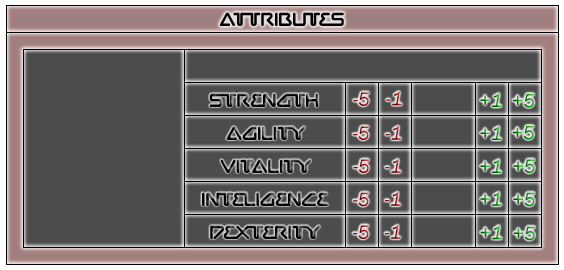
<style>
.page{position:relative;width:564px;height:270px;background:#4c4c4c}
.page>*{position:absolute;margin:0}
.t1{font:20px "Chilopod-Regular";color:#000000}
.t2{font:20px "FranklinGothic-BookItalic"}
.t3{font:20px "FranklinGothic-BookItalic";color:#960000}
</style>
<div class="page">
<p class="t1" style="left:220px;top:12px;width:124px;height:14px">Attributes</p>
<p class="t1" style="left:209px;top:93px;width:110px;height:14px">Strength</p>
<p class="t2" style="left:353px;top:92px;width:17px;height:14px">-5</p>
<p class="t2" style="left:386px;top:91px;width:16px;height:15px">-1</p>
<p class="t2" style="left:480px;top:93px;width:22px;height:14px">+1</p>
<p class="t2" style="left:513px;top:94px;width:22px;height:14px">+5</p>
<p class="t1" style="left:226px;top:126px;width:80px;height:14px">Agility</p>
<p class="t2" style="left:353px;top:126px;width:16px;height:14px">-5</p>
<p class="t3" style="left:385px;top:126px;width:17px;height:14px">-1</p>
<p class="t2" style="left:480px;top:126px;width:22px;height:14px">+1</p>
<p class="t2" style="left:512px;top:126px;width:23px;height:14px">+5</p>
<p class="t1" style="left:220px;top:159px;width:92px;height:14px">Vitality</p>
<p class="t2" style="left:353px;top:159px;width:17px;height:14px">-5</p>
<p class="t2" style="left:385px;top:159px;width:16px;height:14px">-1</p>
<p class="t2" style="left:480px;top:159px;width:22px;height:14px">+1</p>
<p class="t2" style="left:513px;top:159px;width:22px;height:14px">+5</p>
<p class="t1" style="left:202px;top:192px;width:127px;height:14px">Inteligence</p>
<p class="t2" style="left:353px;top:192px;width:16px;height:15px">-5</p>
<p class="t2" style="left:385px;top:192px;width:16px;height:14px">-1</p>
<p class="t2" style="left:480px;top:192px;width:22px;height:14px">+1</p>
<p class="t2" style="left:513px;top:192px;width:22px;height:15px">+5</p>
<p class="t1" style="left:210px;top:225px;width:110px;height:14px">Dexterity</p>
<p class="t2" style="left:353px;top:225px;width:16px;height:14px">-5</p>
<p class="t2" style="left:385px;top:225px;width:16px;height:14px">-1</p>
<p class="t2" style="left:480px;top:225px;width:22px;height:15px">+1</p>
<p class="t2" style="left:513px;top:226px;width:23px;height:15px">+5</p>
</div>
